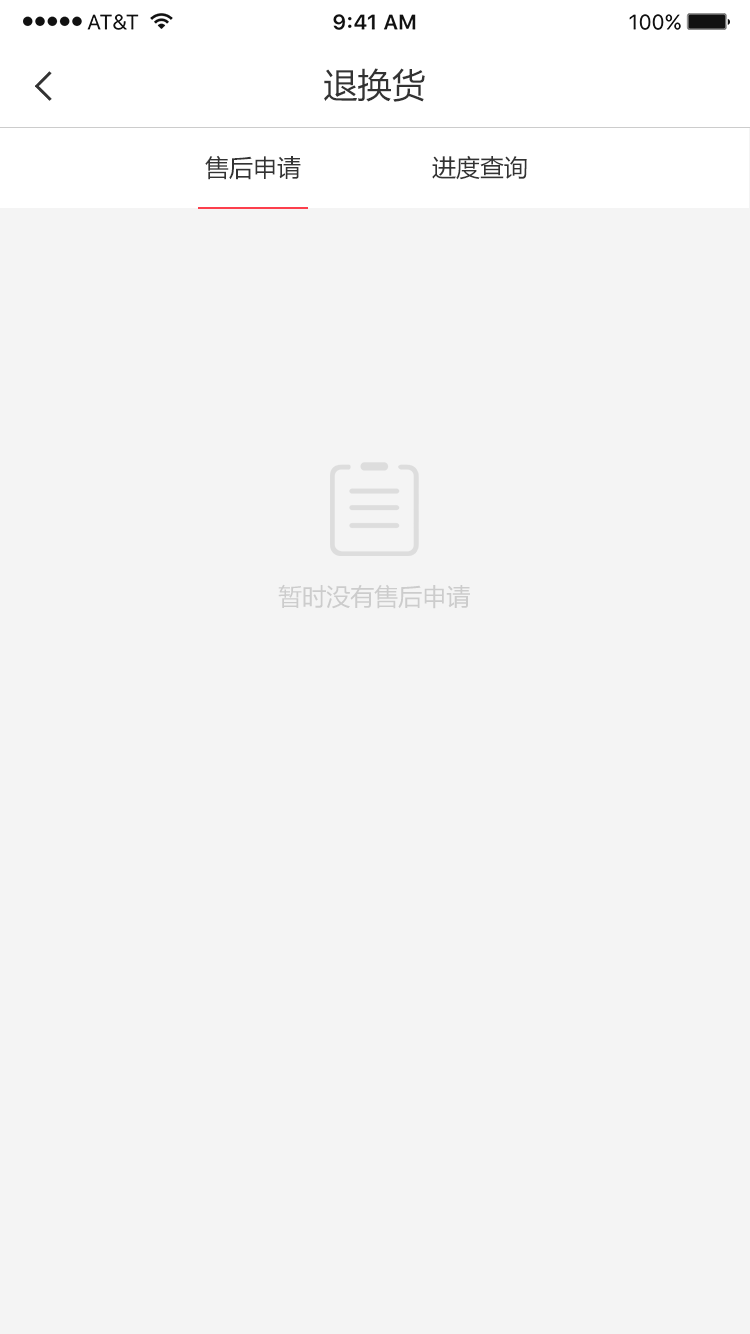
<style>
.page{position:relative;width:750px;height:1334px;background:#f4f4f4}
.page>*{position:absolute;margin:0}
.t1{font:34px "MicrosoftYaHei";color:#333333}
.t2{font:24px "MicrosoftYaHei";color:#333333}
.t3{font:24px "MicrosoftYaHei";color:#cccccc}
</style>
<div class="page">
<p class="t1" style="left:324px;top:68px;width:101px;height:34px">退换货</p>
<p class="t2" style="left:205px;top:155px;width:96px;height:25px">售后申请</p>
<p class="t2" style="left:432px;top:155px;width:95px;height:25px">进度查询</p>
<p class="t3" style="left:278px;top:584px;width:192px;height:25px">暂时没有售后申请</p>
</div>
